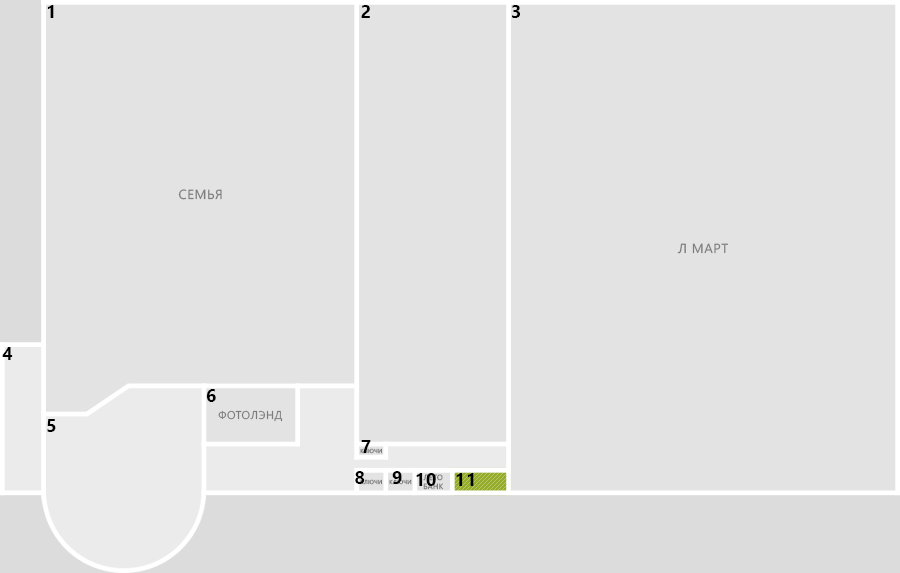
<style>
.page{position:relative;width:900px;height:573px;background:#e3e3e3}
.page>*{position:absolute;margin:0}
.t1{font:18px "SegoeUI-Bold";letter-spacing:0.05em;color:#000000;text-transform:uppercase}
.t2{font:13.1px "SegoeUI";letter-spacing:0.05em;color:#7c7c7c;text-transform:uppercase}
.t3{font:11.3px "SegoeUI";letter-spacing:0.05em;color:#7c7c7c;text-transform:uppercase}
.t4{font:5.6px "SegoeUI";letter-spacing:0.05em;color:#7c7c7c;text-transform:uppercase}
.t5{font:5.6px "SegoeUI";letter-spacing:0.05em;text-transform:uppercase}
</style>
<div class="page">
<p class="t1" style="left:47px;top:5px;width:7px;height:13px">1</p>
<p class="t1" style="left:361px;top:5px;width:9px;height:13px">2</p>
<p class="t1" style="left:512px;top:5px;width:8px;height:13px">3</p>
<p class="t2" style="left:178px;top:189px;width:44px;height:11px">Семья</p>
<p class="t2" style="left:677px;top:243px;width:52px;height:11px">л март</p>
<p class="t1" style="left:2px;top:347px;width:11px;height:13px">4</p>
<p class="t1" style="left:206px;top:389px;width:10px;height:13px">6</p>
<p class="t3" style="left:218px;top:410px;width:65px;height:12px">ФотоЛэнд</p>
<p class="t1" style="left:47px;top:419px;width:9px;height:13px">5</p>
<p class="t4" style="left:360px;top:448px;width:22px;height:6px">Ключи</p>
<p class="t1" style="left:361px;top:440px;width:10px;height:13px">7</p>
<p class="t1" style="left:355px;top:471px;width:10px;height:13px">8</p>
<p class="t1" style="left:392px;top:471px;width:10px;height:13px">9</p>
<p class="t1" style="left:416px;top:473px;width:20px;height:13px">10</p>
<p class="t1" style="left:456px;top:473px;width:18px;height:13px">11</p>
<p class="t4" style="left:360px;top:479px;width:22px;height:6px">Ключи</p>
<p class="t5" style="left:389px;top:479px;width:23px;height:6px">Ключи</p>
</div>
